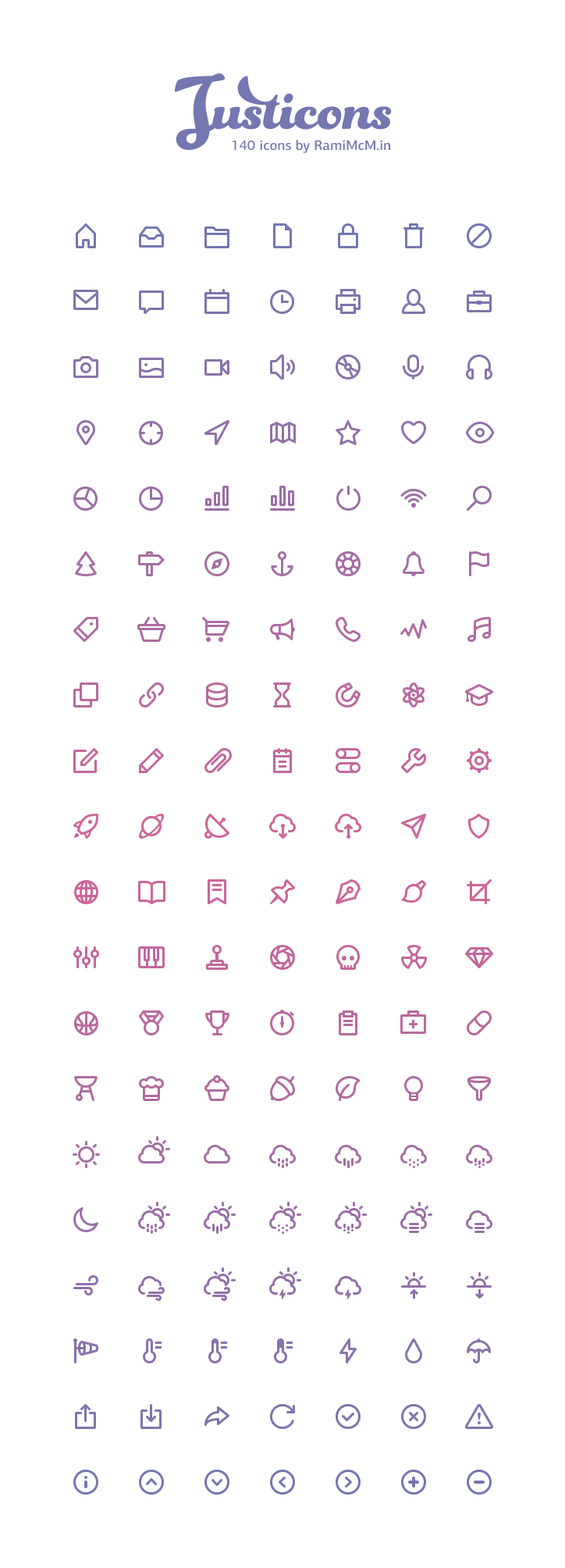
<style>
.page{position:relative;width:565px;height:1568px;background:#ffffff}
.page>*{position:absolute;margin:0}
.t1{font:14.1px "PFCentroSansPro-Medium";color:#7477b0}
</style>
<div class="page">
<p class="t1" style="left:233px;top:140px;width:157px;height:13px">140 icons by RamiMcM.in</p>
</div>
